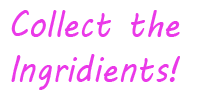
<style>
.page{position:relative;width:200px;height:100px;background:#ffffff}
.page>*{position:absolute;margin:0}
.t1{font:37.5px "MVBoli";color:#ea39e8;scale:0.89 1}
</style>
<div class="page">
<p class="t1" style="left:11px;top:10px;width:169px;height:80px;text-align:center">Collect the Ingridients!</p>
</div>
